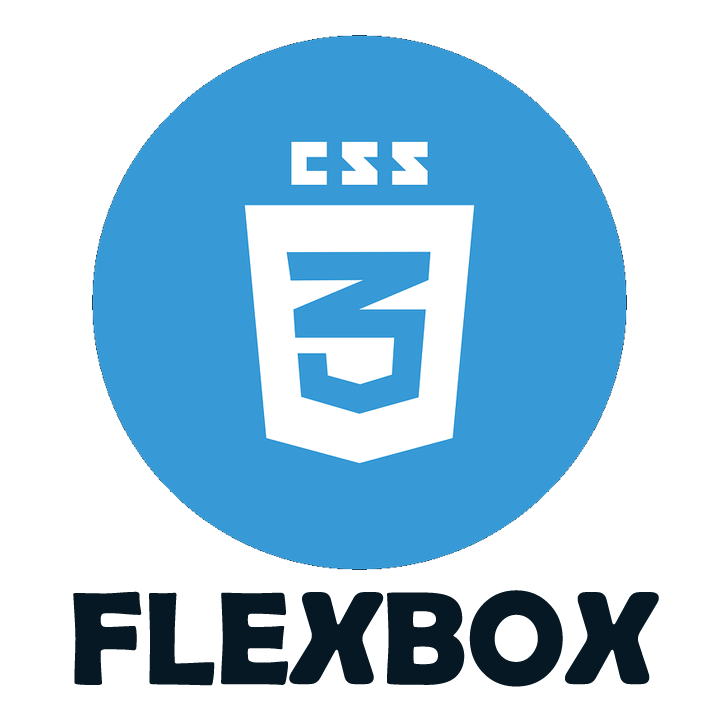
<style>
.page{position:relative;width:720px;height:720px;background:#ffffff}
.page>*{position:absolute;margin:0}
.t1{font:133px "BerlinSansFBDemi-Bold";color:#051823}
.t2{font:133px "ExoSoft-BlackItalic";color:#051823}
</style>
<div class="page">
<p class="t1" style="left:73px;top:590px;width:586px;height:97px">FLE<span class="t2">X</span>BO<span class="t2">X</span></p>
</div>
